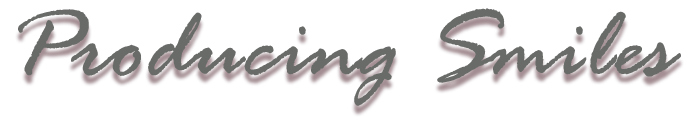
<style>
.page{position:relative;width:700px;height:120px;background:#ffffff}
.page>*{position:absolute;margin:0}
.t1{font:102.7px "RageItalic";color:#686b68}
</style>
<div class="page">
<p class="t1" style="left:18px;top:8px;width:663px;height:98px">Producing Smiles</p>
</div>
